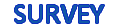
<style>
.page{position:relative;width:125px;height:26px;background:#ffffff}
.page>*{position:absolute;margin:0}
.t1{font:24px "MicrosoftYaHei";color:#1158a9}
</style>
<div class="page">
<p class="t1" style="left:15px;top:5px;width:89px;height:18px">SURVEY</p>
</div>
